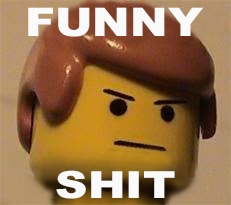
<style>
.page{position:relative;width:231px;height:205px}
.page>*{position:absolute;margin:0}
.t1{font:39.4px "Arial-Black";color:#fafafa;scale:1.14 1}
.t2{font:37.2px "Arial-Black";color:#fafafa;scale:1.21 1}
</style>
<div class="page">
<p class="t1" style="left:28px;top:7px;width:175px;height:30px">FUNNY</p>
<p class="t2" style="left:56px;top:170px;width:119px;height:29px">SHIT</p>
</div>
